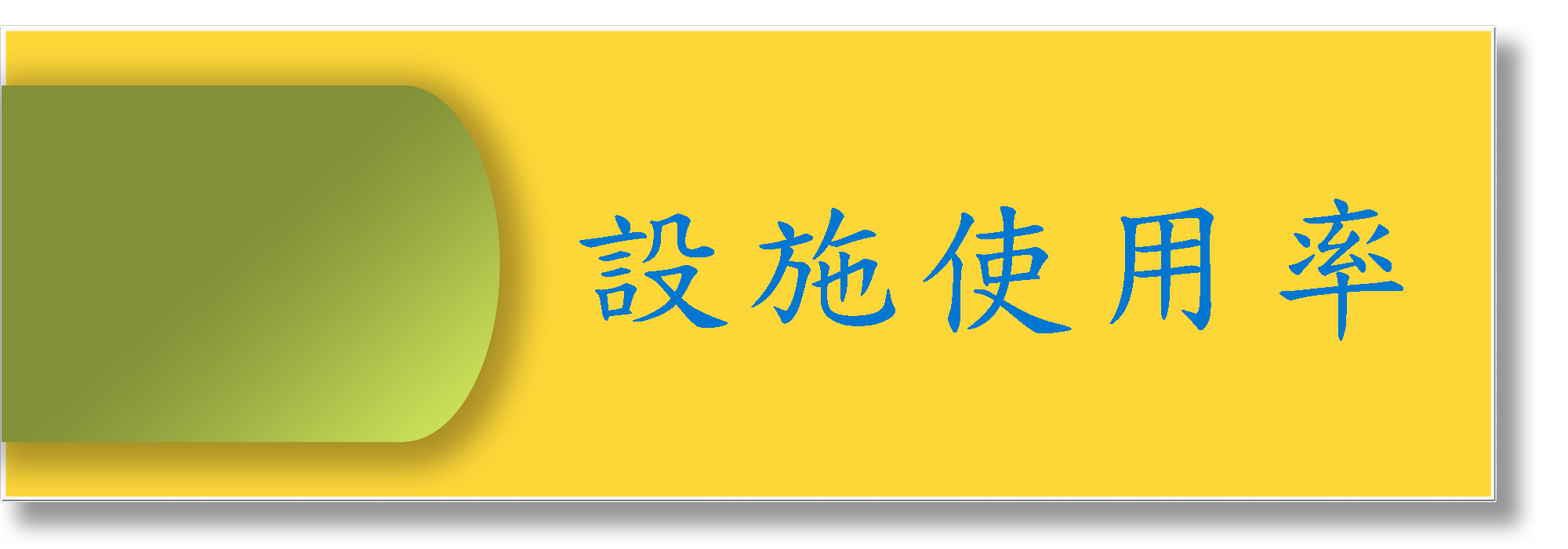
<style>
.page{position:relative;width:1568px;height:549px;background:#fdd638}
.page>*{position:absolute;margin:0}
.t1{font:156.8px "DFKaiShu-SB-Estd-BF";letter-spacing:0.08em;color:#0277d2}
</style>
<div class="page">
<p class="t1" style="left:579px;top:198px;width:824px;height:143px">設施使用率</p>
</div>
